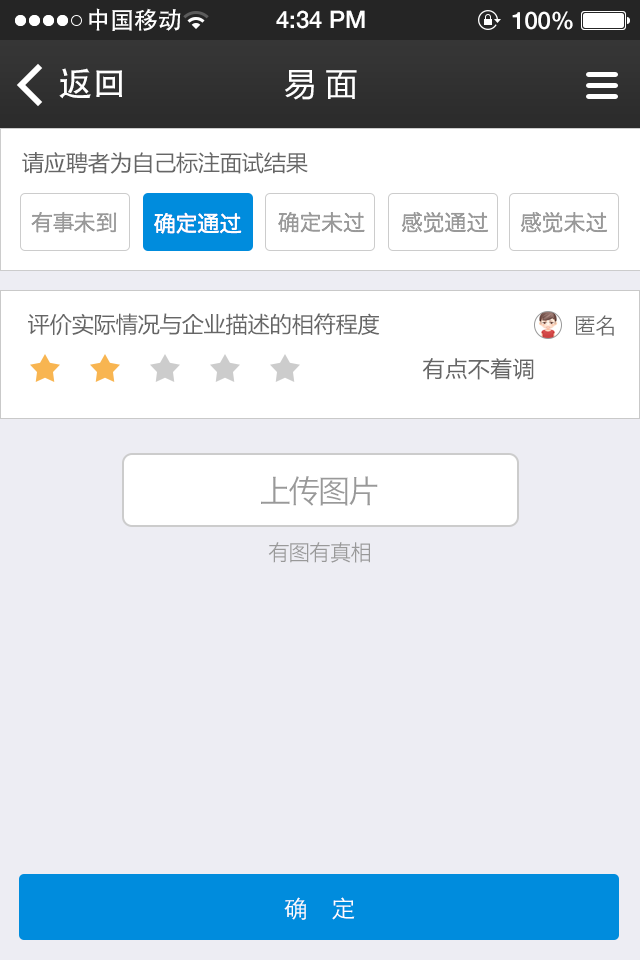
<style>
.page{position:relative;width:640px;height:960px;background:#ededf3}
.page>*{position:absolute;margin:0}
.t1{font:24px "AdobeHeitiStd-Regular";color:#ffffff}
.t2{font:24px "HelveticaNeue-Medium";color:#ffffff}
.t3{font:34px "AdobeHeitiStd-Regular";color:#ffffff}
.t4{font:32px "MicrosoftYaHei";color:#ffffff}
.t5{font:22px "MicrosoftYaHei";color:#666666}
.t6{font:22px "HiraginoSansGB-W3";color:#999999}
.t7{font:22px "HiraginoSansGB-W3";color:#ffffff}
.t8{font:22px "HiraginoSansGB-W3";letter-spacing:-0.05em;color:#666666}
.t9{font:22px "MicrosoftYaHei";letter-spacing:0.025em;color:#666666}
.t10{font:32px "HiraginoSansGB-W3";letter-spacing:-0.05em;color:#999999}
.t11{font:22px "HiraginoSansGB-W3";letter-spacing:-0.05em;color:#999999}
.t12{font:24px "STHeitiSC-Light";color:#ffffff}
</style>
<div class="page">
<p class="t1" style="left:89px;top:8px;width:92px;height:23px">中国移动</p>
<p class="t2" style="left:276px;top:10px;width:89px;height:19px">4:34 PM</p>
<p class="t2" style="left:512px;top:11px;width:61px;height:19px">100%</p>
<p class="t3" style="left:59px;top:68px;width:63px;height:31px">返回</p>
<p class="t4" style="left:285px;top:70px;width:72px;height:30px">易 面</p>
<p class="t5" style="left:22px;top:152px;width:286px;height:22px">请应聘者为自己标注面试结果</p>
<p class="t6" style="left:31px;top:211px;width:86px;height:22px">有事未到</p>
<p class="t7" style="left:154px;top:212px;width:88px;height:22px">确定通过</p>
<p class="t6" style="left:278px;top:211px;width:87px;height:22px">确定未过</p>
<p class="t6" style="left:401px;top:211px;width:88px;height:22px">感觉通过</p>
<p class="t6" style="left:520px;top:211px;width:88px;height:22px">感觉未过</p>
<p class="t5" style="left:28px;top:313px;width:352px;height:23px">评价实际情况与企业描述的相符程度</p>
<p class="t8" style="left:575px;top:315px;width:39px;height:21px">匿名</p>
<p class="t9" style="left:422px;top:358px;width:112px;height:22px">有点不着调</p>
<p class="t10" style="left:261px;top:476px;width:117px;height:30px">上传图片</p>
<p class="t11" style="left:268px;top:542px;width:102px;height:21px">有图有真相</p>
<p class="t12" style="left:284px;top:897px;width:71px;height:23px">确    定</p>
</div>
